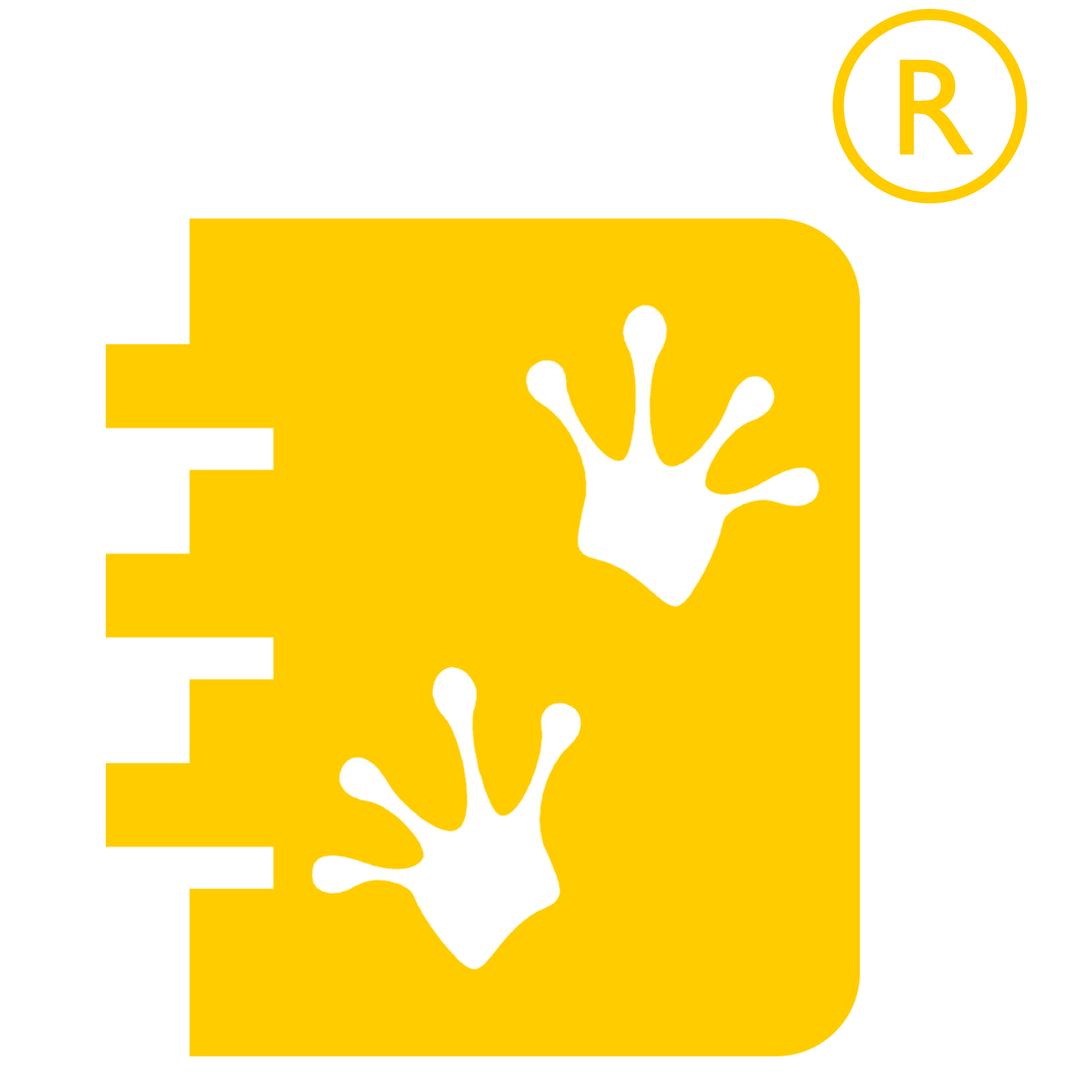
<style>
.page{position:relative;width:1092px;height:1092px;background:#ffffff}
.page>*{position:absolute;margin:0}
.t1{font:138.1px "GillSansMT";color:#ffcc00;font-weight:bold}
</style>
<div class="page">
<p class="t1" style="left:900px;top:59px;width:73px;height:96px">R</p>
</div>
